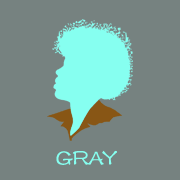
<style>
.page{position:relative;width:180px;height:180px;background:#768280}
.page>*{position:absolute;margin:0}
.t1{font:24px "FZSTK--GBK1-0";letter-spacing:-0.06em;color:#86fff0}
</style>
<div class="page">
<p class="t1" style="left:56px;top:150px;width:61px;height:15px">GRAY</p>
</div>
